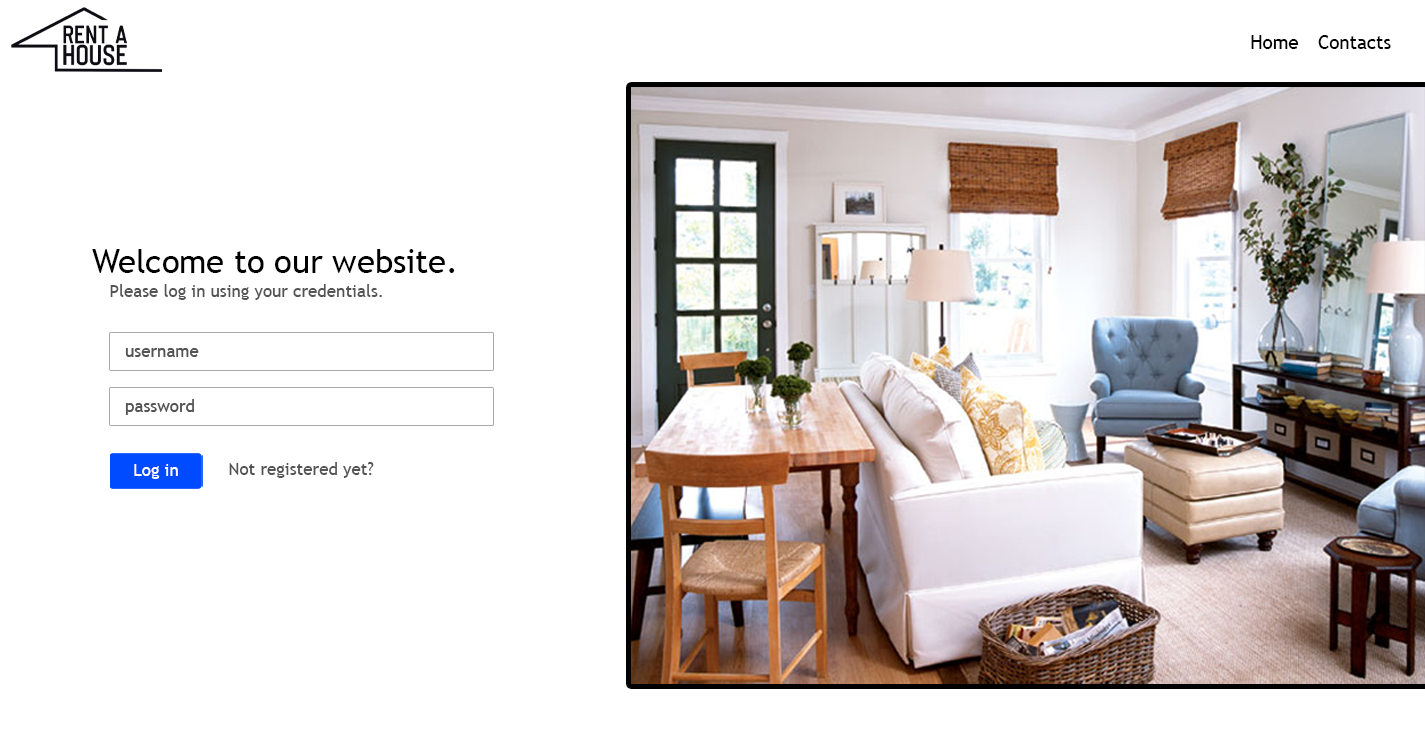
<style>
.page{position:relative;width:1425px;height:738px;background:#ffffff}
.page>*{position:absolute;margin:0}
.t1{font:18.7px "TrebuchetMS";color:#000000}
.t2{font:32.7px "TrebuchetMS";color:#000000}
.t3{font:17px "TrebuchetMS";color:#545454}
.t4{font:17px "TrebuchetMS";color:#ffffff}
</style>
<div class="page">
<p class="t1" style="left:1251px;top:35px;width:48px;height:14px">Home</p>
<p class="t1" style="left:1318px;top:35px;width:73px;height:14px">Contacts</p>
<p class="t2" style="left:92px;top:249px;width:363px;height:24px">Welcome to our website.</p>
<p class="t3" style="left:110px;top:284px;width:272px;height:16px">Please log in using your credentials.</p>
<p class="t3" style="left:229px;top:462px;width:145px;height:16px">Not registered yet?</p>
<p class="t4" style="left:134px;top:464px;width:44px;height:15px">Log in</p>
</div>
